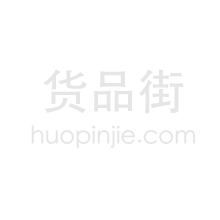
<style>
.page{position:relative;width:220px;height:220px;background:#ffffff}
.page>*{position:absolute;margin:0}
.t1{font:48px "STHeitiSC-Medium";color:#e6e6e6}
.t2{font:24px "STHeitiSC-Medium";color:#e6e6e6}
</style>
<div class="page">
<p class="t1" style="left:43px;top:69px;width:140px;height:45px">货品街</p>
<p class="t2" style="left:31px;top:125px;width:164px;height:24px">huopinjie.com</p>
</div>
